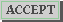
<style>
.page{position:relative;width:63px;height:22px;background:#cfcece}
.page>*{position:absolute;margin:0}
.t1{font:14px "NuevaStd-Bold";color:#4b4b4b}
</style>
<div class="page">
<p class="t1" style="left:6px;top:5px;width:9px;height:9px">A</p>
<p class="t1" style="left:15px;top:5px;width:15px;height:9px">CC</p>
<p class="t1" style="left:31px;top:5px;width:7px;height:9px">E</p>
<p class="t1" style="left:39px;top:5px;width:16px;height:9px">PT</p>
</div>
